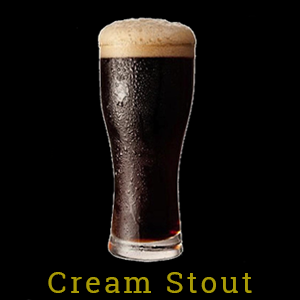
<style>
.page{position:relative;width:300px;height:300px;background:#000000}
.page>*{position:absolute;margin:0}
.t1{font:30px "RobotoSlab-Regular";letter-spacing:0.1em;color:#a99b06}
</style>
<div class="page">
<p class="t1" style="left:48px;top:272px;width:204px;height:21px">Cream Stout</p>
</div>
